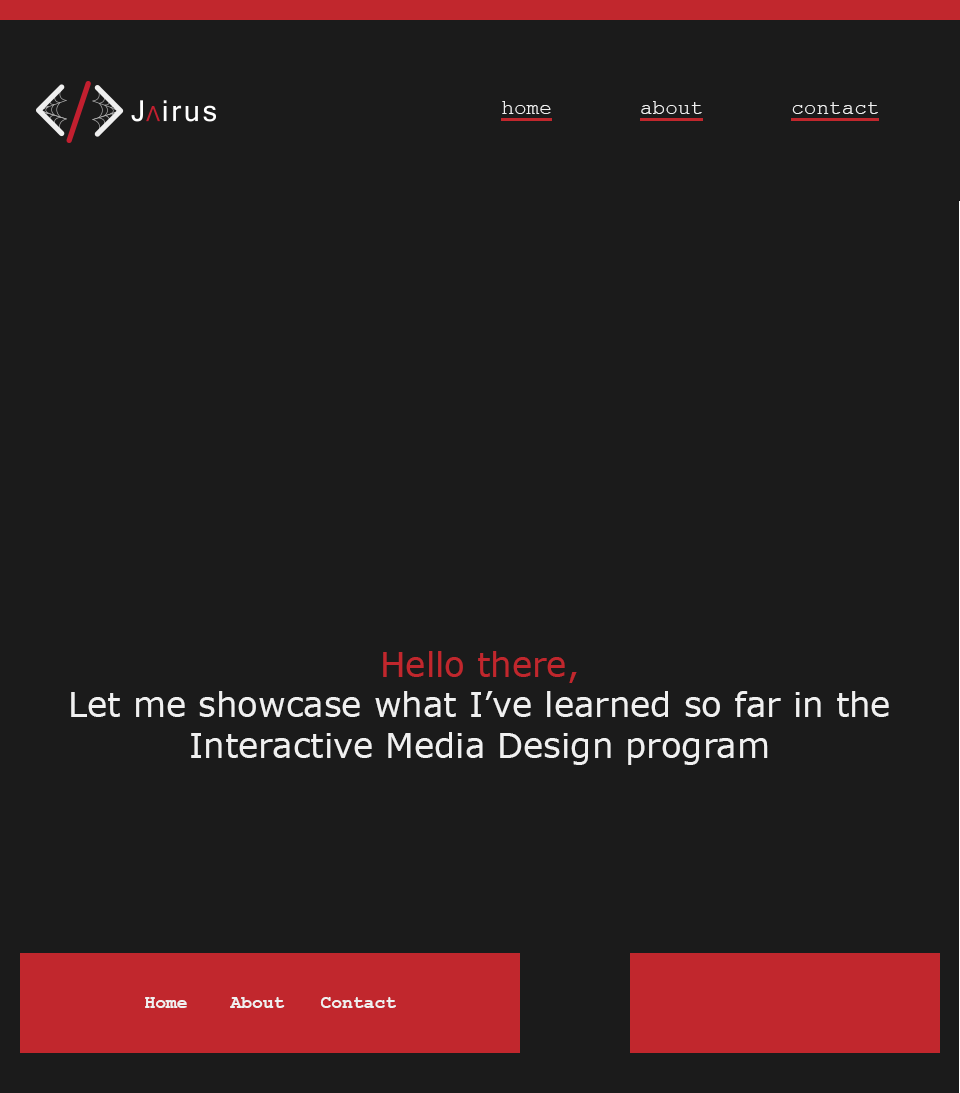
<style>
.page{position:relative;width:960px;height:1093px;background:#1b1b1b}
.page>*{position:absolute;margin:0}
.t1{font:21px "CourierNewPSMT";color:#f0f0f0}
.t2{font:34px "MSReferenceSansSerif";color:#f0f0f0}
.t3{font:34px "MSReferenceSansSerif";color:#c1272d}
.t4{font:18px "CourierNewPS-BoldMT";color:#f0f0f0}
</style>
<div class="page">
<p class="t1" style="left:502px;top:101px;width:376px;height:13px">home       about       contact</p>
<p class="t1" style="left:502px;top:101px;width:376px;height:13px">home       about       contact</p>
<p class="t2" style="left:71px;top:651px;width:818px;height:114px;text-align:center"><span class="t3">Hello there, <br></span>Let me showcase what I’ve learned so far in the Interactive Media Design program</p>
<p class="t4" style="left:145px;top:997px;width:42px;height:11px">Home</p>
<p class="t4" style="left:230px;top:997px;width:55px;height:11px">About</p>
<p class="t4" style="left:320px;top:997px;width:76px;height:11px">Contact</p>
</div>
